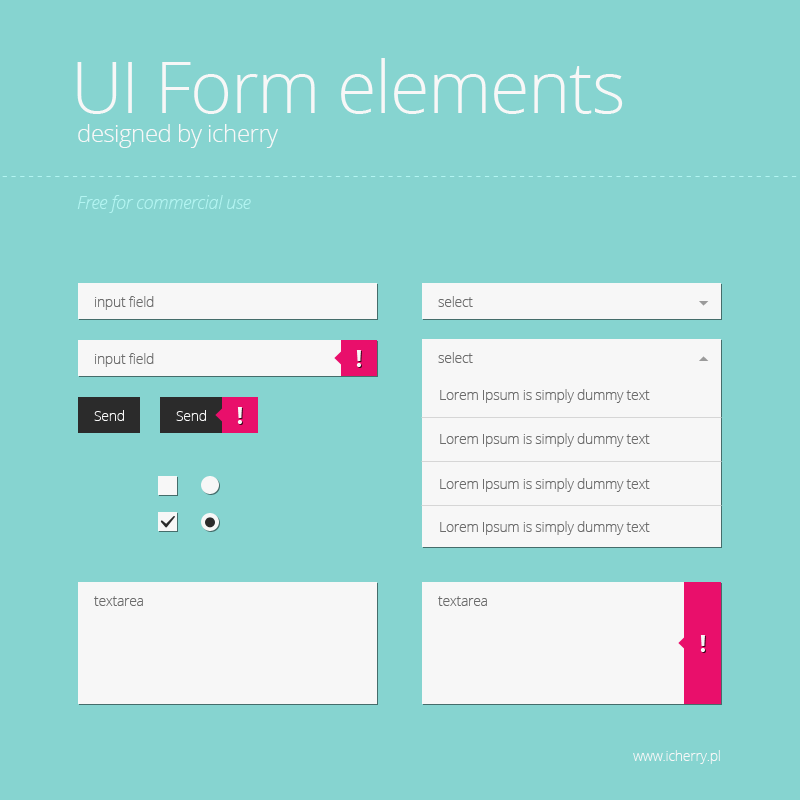
<style>
.page{position:relative;width:800px;height:800px;background:#86d4d0}
.page>*{position:absolute;margin:0}
.t1{font:72px "OpenSans-Light";letter-spacing:-0.02em;color:#f7f7f7}
.t2{font:24px "OpenSans-Light";letter-spacing:-0.02em;color:#f7f7f7}
.t3{font:18px "OpenSansLight-Italic";letter-spacing:-0.02em;color:#b2f4f1}
.t4{font:14px "OpenSans-Light";letter-spacing:-0.02em;color:#6c6c6c}
.t5{font:24px "OpenSans-Bold";letter-spacing:-0.02em;color:#f7f7f7}
.t6{font:14px "OpenSans-Light";letter-spacing:-0.02em;color:#f7f7f7}
</style>
<div class="page">
<p class="t1" style="left:77px;top:58px;width:546px;height:56px">UI Form elements</p>
<p class="t2" style="left:78px;top:124px;width:200px;height:24px">designed by icherry</p>
<p class="t3" style="left:77px;top:195px;width:174px;height:18px">Free for commercial use</p>
<p class="t4" style="left:95px;top:296px;width:59px;height:14px">input field</p>
<p class="t4" style="left:438px;top:296px;width:35px;height:11px">select</p>
<p class="t4" style="left:95px;top:353px;width:59px;height:14px">input field</p>
<p class="t5" style="left:356px;top:350px;width:5px;height:17px">!</p>
<p class="t4" style="left:438px;top:352px;width:35px;height:11px">select</p>
<p class="t4" style="left:440px;top:389px;width:210px;height:14px">Lorem Ipsum is simply dummy text</p>
<p class="t6" style="left:94px;top:410px;width:30px;height:11px">Send</p>
<p class="t6" style="left:176px;top:410px;width:30px;height:11px">Send</p>
<p class="t5" style="left:237px;top:407px;width:5px;height:17px">!</p>
<p class="t4" style="left:440px;top:433px;width:210px;height:14px">Lorem Ipsum is simply dummy text</p>
<p class="t4" style="left:440px;top:478px;width:210px;height:14px">Lorem Ipsum is simply dummy text</p>
<p class="t4" style="left:440px;top:521px;width:210px;height:14px">Lorem Ipsum is simply dummy text</p>
<p class="t4" style="left:94px;top:596px;width:49px;height:10px">textarea</p>
<p class="t4" style="left:438px;top:596px;width:49px;height:10px">textarea</p>
<p class="t5" style="left:700px;top:635px;width:5px;height:17px">!</p>
<p class="t6" style="left:633px;top:750px;width:87px;height:14px">www.icherry.pl</p>
</div>
